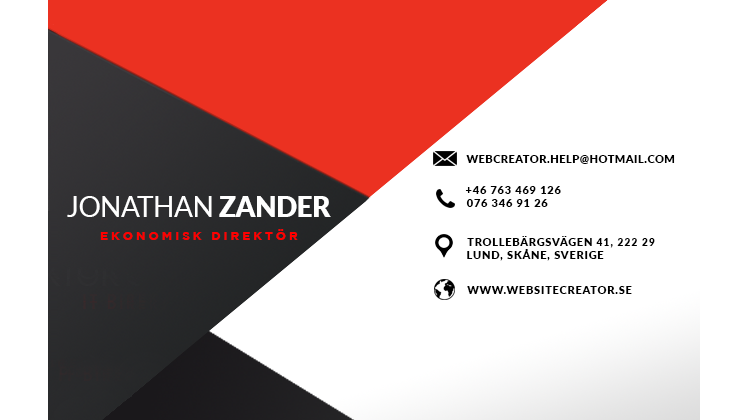
<style>
.page{position:relative;width:750px;height:420px;background:#ffffff}
.page>*{position:absolute;margin:0}
.t1{font:10.4px "Lato-Black";letter-spacing:0.065em;color:#000000}
.t2{font:27.5px "Lato-Regular";letter-spacing:-0.01em;color:#ffffff}
.t3{font:27.5px "Lato-Black";letter-spacing:-0.01em;color:#ffffff}
.t4{font:10.2px "Lato-Black";letter-spacing:0.09em;color:#000000;scale:1.04 1}
.t5{font:12px "GothamBold";letter-spacing:0.25em;color:#ff0000}
.t6{font:10.4px "Lato-Black";letter-spacing:0.09em;color:#000000}
</style>
<div class="page">
<p class="t1" style="left:466px;top:155px;width:209px;height:9px">WEBCREATOR.HELP@HOTMAIL.COM</p>
<p class="t2" style="left:67px;top:196px;width:264px;height:21px">JONATHAN<span class="t3"> ZANDER</span></p>
<p class="t4" style="left:465px;top:186px;width:96px;height:8px">+46 763 469 126</p>
<p class="t4" style="left:466px;top:199px;width:82px;height:8px">076 346 91 26</p>
<p class="t5" style="left:100px;top:229px;width:198px;height:11px">EKONOMISK DIREKTÖR</p>
<p class="t6" style="left:467px;top:236px;width:188px;height:12px">TROLLEBÄRGSVÄGEN 41, 222 29</p>
<p class="t6" style="left:467px;top:249px;width:137px;height:12px">LUND, SKÅNE, SVERIGE</p>
<p class="t6" style="left:467px;top:286px;width:165px;height:8px">WWW.WEBSITECREATOR.SE</p>
</div>
